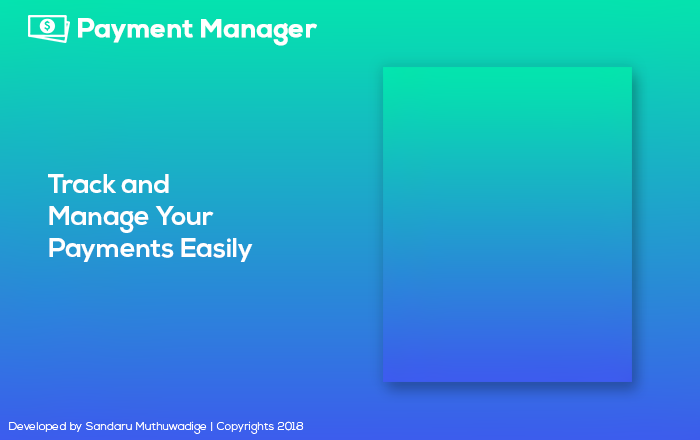
<style>
.page{position:relative;width:700px;height:440px}
.page>*{position:absolute;margin:0}
.t1{font:26.3px "NexaBold";color:#ffffff;font-weight:bold}
.t2{font:26.7px "NexaBold";color:#ffffff}
.t3{font:11.4px "NexaLight";letter-spacing:0.005em;color:#ffffff}
</style>
<div class="page">
<p class="t1" style="left:78px;top:18px;width:239px;height:28px">Payment Manager</p>
<p class="t2" style="left:48px;top:174px;width:205px;height:88px">Track and<br>Manage Your<br>Payments Easily</p>
<p class="t3" style="left:9px;top:421px;width:295px;height:13px">Developed by Sandaru Muthuwadige | Copyrights 2018</p>
</div>
